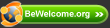
<style>
.page{position:relative;width:110px;height:28px;background:#333333}
.page>*{position:absolute;margin:0}
.t1{font:8.8px "Arial-BoldMT";color:#ffffff}
</style>
<div class="page">
<p class="t1" style="left:25px;top:10px;width:65px;height:9px">BeWelcome.org</p>
</div>
